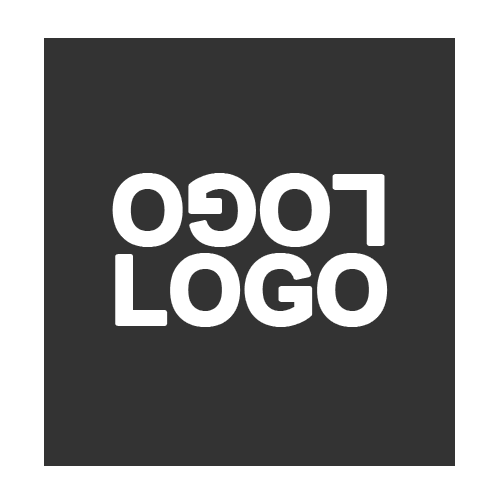
<style>
.page{position:relative;width:500px;height:500px;background:#333333}
.page>*{position:absolute;margin:0}
.t1{font:94.6px "Arial-BoldMT";color:#ffffff}
</style>
<div class="page">
<p class="t1" style="left:114px;top:175px;width:269px;height:70px;rotate:180deg">LOGO</p>
<p class="t1" style="left:117px;top:255px;width:269px;height:70px">LOGO</p>
</div>
